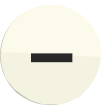
<style>
.page{position:relative;width:101px;height:109px;background:#fcfbeb}
.page>*{position:absolute;margin:0}
.t1{font:72px "MovaviGrotesqueBlack";color:#282828}
</style>
<div class="page">
<p class="t1" style="left:31px;top:53px;width:42px;height:10px">_</p>
</div>
